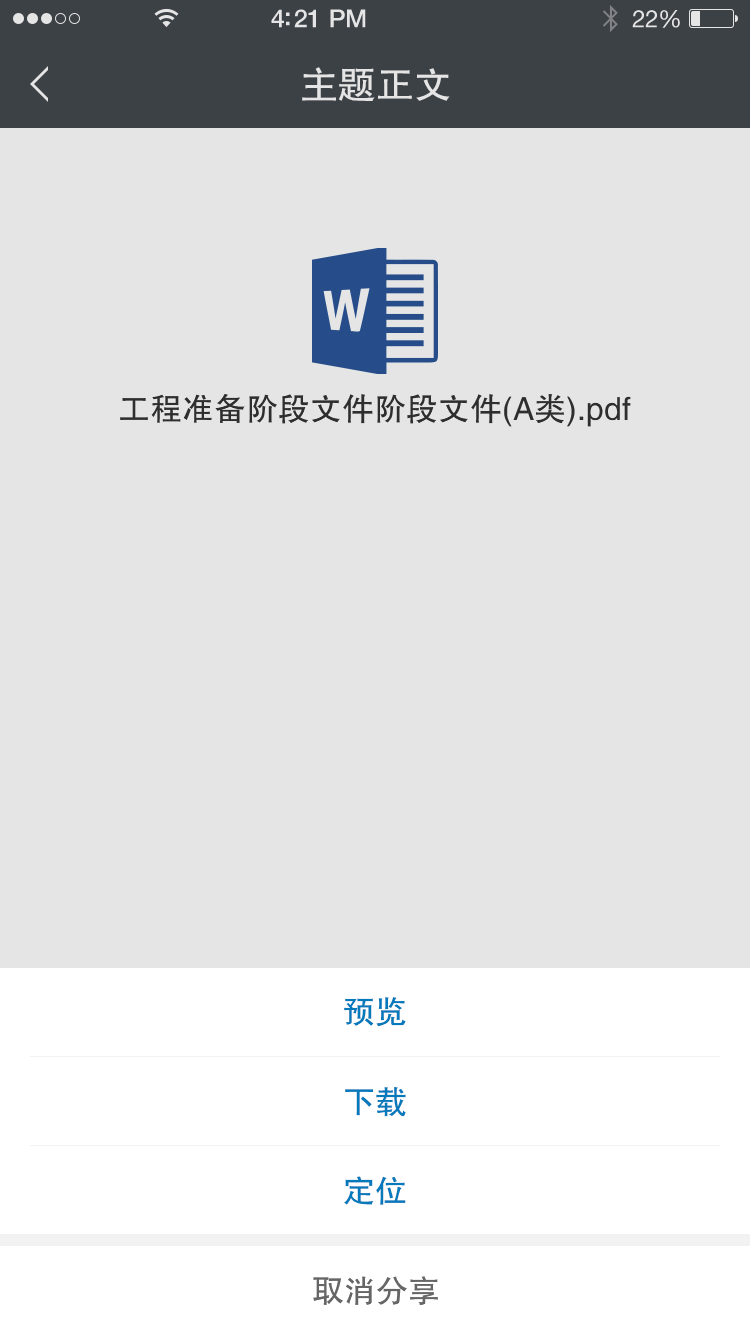
<style>
.page{position:relative;width:750px;height:1334px;background:#e5e5e5}
.page>*{position:absolute;margin:0}
.t1{font:38px "FZHTJW--GB1-0";color:#e5e5e5}
.t2{font:32px "FZHTJW--GB1-0";color:#333333}
.t3{font:32px "FZHTJW--GB1-0";color:#0479bb}
.t4{font:32px "FZHTJW--GB1-0";color:#666666}
</style>
<div class="page">
<p class="t1" style="left:302px;top:67px;width:148px;height:34px">主题正文</p>
<p class="t2" style="left:120px;top:394px;width:511px;height:33px">工程准备阶段文件阶段文件(A类).pdf</p>
<p class="t3" style="left:344px;top:997px;width:62px;height:30px">预览</p>
<p class="t3" style="left:345px;top:1087px;width:61px;height:30px">下载</p>
<p class="t3" style="left:344px;top:1176px;width:62px;height:29px">定位</p>
<p class="t4" style="left:313px;top:1276px;width:125px;height:29px">取消分享</p>
</div>
